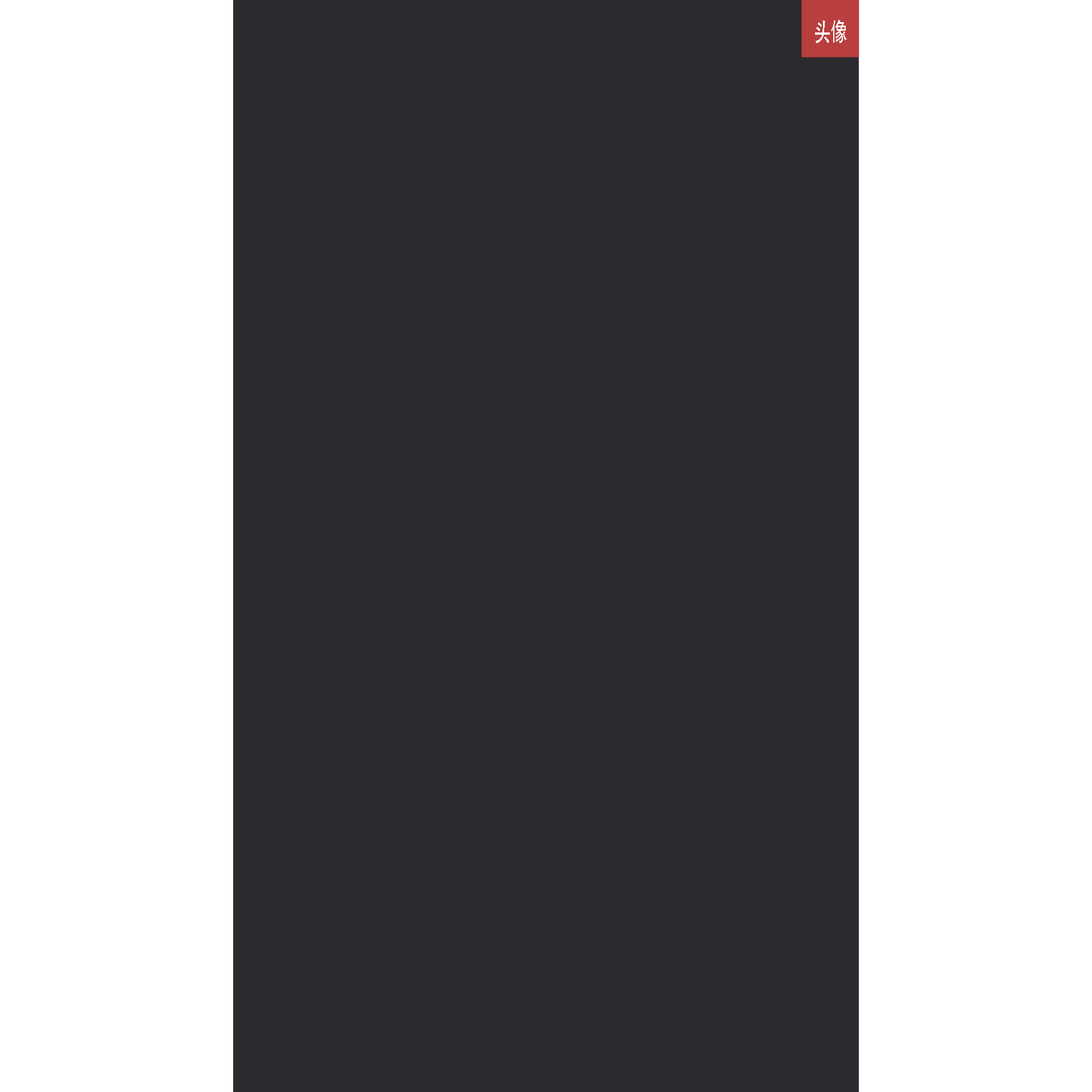
<style>
.page{position:relative;width:1092px;height:1092px;background:#2c2a2e}
.page>*{position:absolute;margin:0}
.t1{font:25.3px "AdobeHeitiStd-Regular";color:#ffffff;scale:0.68 1}
</style>
<div class="page">
<p class="t1" style="left:815px;top:20px;width:32px;height:23px">头像</p>
</div>
